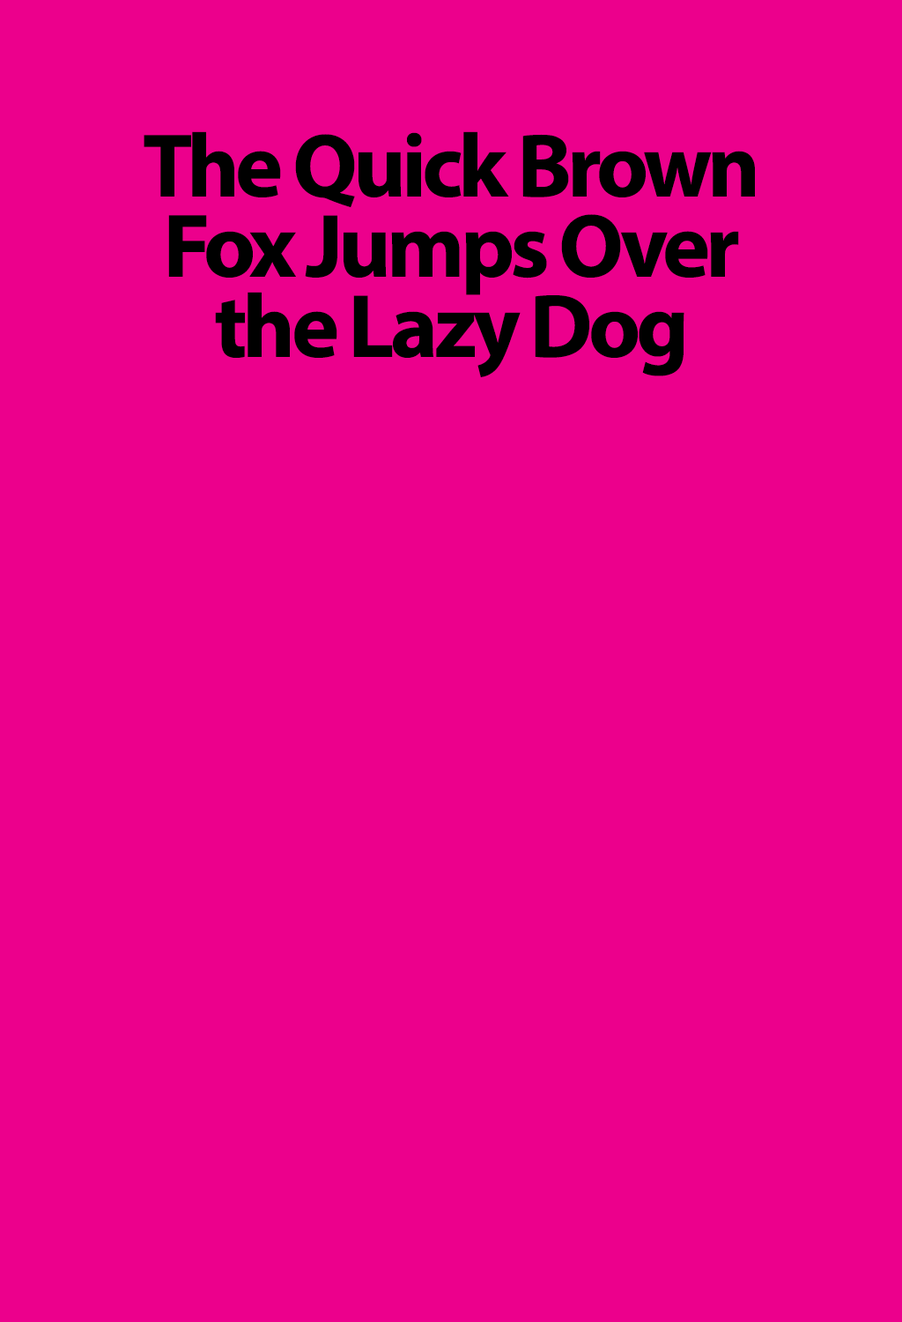
<style>
.page{position:relative;width:902px;height:1322px;background:#ec008c}
.page>*{position:absolute;margin:0}
.t1{font:90.8px/80.2px "MyriadPro-Bold";letter-spacing:-0.05em;color:#000000}
</style>
<div class="page">
<p class="t1" style="left:144px;top:131px;width:611px;height:246px;text-align:center">The Quick Brown Fox Jumps Over the Lazy Dog</p>
</div>
